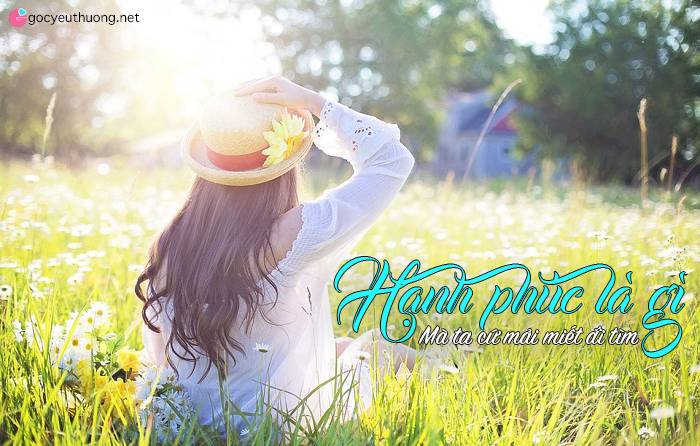
<style>
.page{position:relative;width:700px;height:446px}
.page>*{position:absolute;margin:0}
.t1{font:18px "AppleSymbols";color:#000000}
.t2{font:64.3px "FS-Bandung";color:#27f7ff}
.t3{font:28.3px "SignPainter-HouseScript";color:#ffffff}
</style>
<div class="page">
<p class="t1" style="left:28px;top:12px;width:112px;height:13px">gocyeuthuong.net</p>
<p class="t2" style="left:334px;top:257px;width:351px;height:101px">Hạnh phúc là gì</p>
<p class="t3" style="left:419px;top:326px;width:220px;height:18px">Mà ta cứ mải miết đi tìm</p>
</div>
